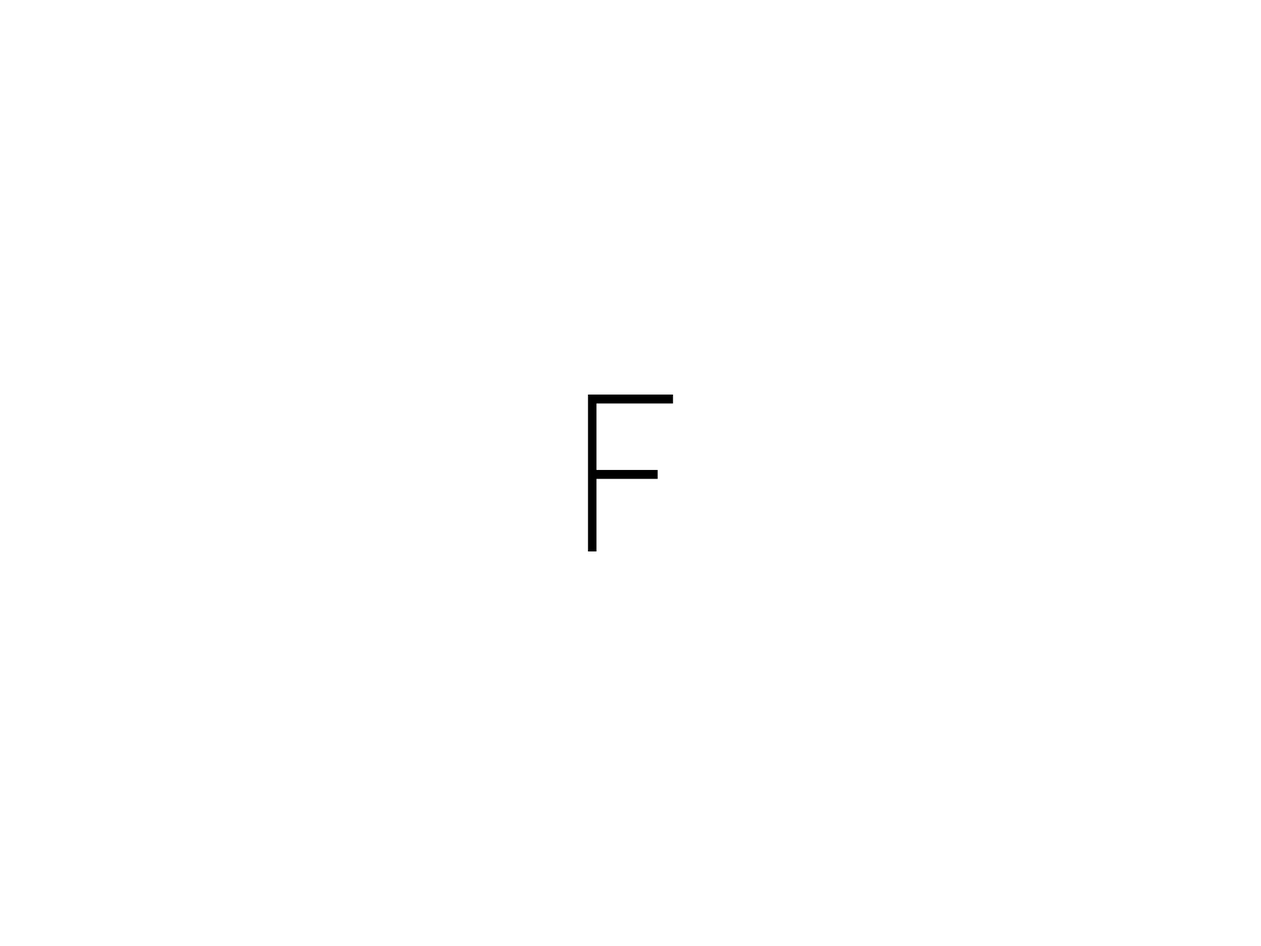
<style>
.page{position:relative;width:1261px;height:946px;background:#ffffff}
.page>*{position:absolute;margin:0}
.t1{font:222.4px "Alcubierre";color:#000000}
</style>
<div class="page">
<p class="t1" style="left:588px;top:394px;width:85px;height:157px">F</p>
</div>
